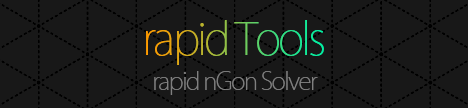
<style>
.page{position:relative;width:468px;height:108px;background:#181818}
.page>*{position:absolute;margin:0}
.t1{font:44.1px "KozGoPr6N-ExtraLight";letter-spacing:-0.06em}
.t2{font:24.1px "KozGoPr6N-ExtraLight";letter-spacing:-0.06em;color:#7f7f7f}
</style>
<div class="page">
<p class="t1" style="left:146px;top:20px;width:178px;height:45px">rapid Tools</p>
<p class="t2" style="left:154px;top:71px;width:164px;height:24px">rapid nGon Solver</p>
</div>
